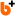
<style>
.page{position:relative;width:16px;height:16px;background:#ffffff}
.page>*{position:absolute;margin:0}
.t1{font:20px "Bauhaus93";letter-spacing:-0.06em;color:#ff6600}
.t2{font:12px "Bauhaus93";letter-spacing:-0.06em;color:#000000}
</style>
<div class="page">
<p class="t1" style="left:0px;top:2px;width:11px;height:14px">b</p>
<p class="t2" style="left:8px;top:0px;width:7px;height:7px">+</p>
</div>
